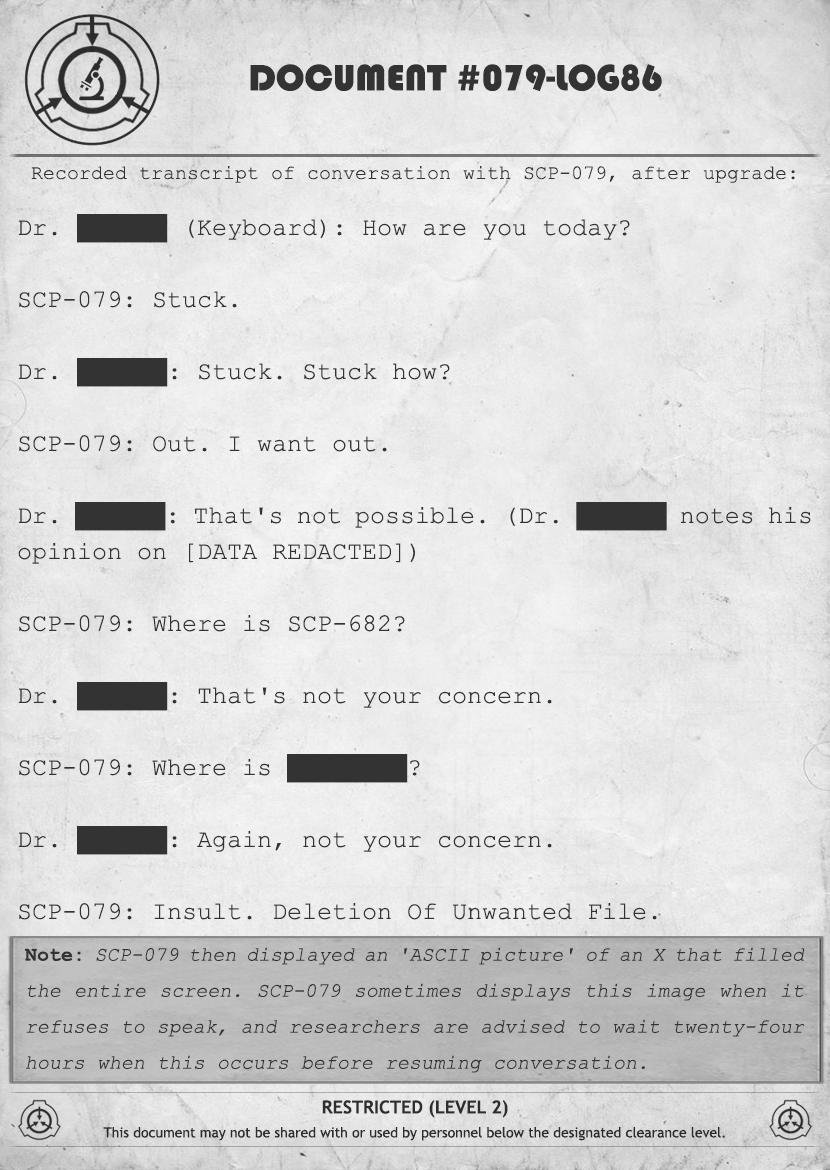
<style>
.page{position:relative;width:830px;height:1170px}
.page>*{position:absolute;margin:0}
.t1{font:38px "Bauhaus93";color:#333333;text-transform:uppercase}
.t2{font:20px "CourierNewPSMT";color:#333333}
.t3{font:25px/36px "CourierNewPSMT";color:#333333}
.t4{font:20px/36px "CourierNewPSMT";color:#333333;font-style:italic}
.t5{font:20px/36px "CourierNewPS-BoldMT";color:#333333}
.t6{font:14px/24px "TrebuchetMS";color:#333333}
.t7{font:18px/24px "TrebuchetMS-Bold";color:#333333}
</style>
<div class="page">
<p class="t1" style="left:250px;top:64px;width:412px;height:28px">Document #079-Log86</p>
<p class="t2" style="left:31px;top:166px;width:764px;height:17px">Recorded transcript of conversation with SCP-079, after upgrade:</p>
<p class="t3" style="left:18px;top:214px;width:793px;height:706px;text-align:justify">Dr. ██████ (Keyboard): How are you today?<br><br>SCP-079: Stuck.<br><br>Dr. ██████: Stuck. Stuck how?<br><br>SCP-079: Out. I want out.<br><br>Dr. ██████: That's not possible. (Dr. ██████ notes his opinion on [DATA REDACTED])<br><br>SCP-079: Where is SCP-682?<br><br>Dr. ██████: That's not your concern.<br><br>SCP-079: Where is ████████?<br><br>Dr. ██████: Again, not your concern.<br><br>SCP-079: Insult. Deletion Of Unwanted File.</p>
<p class="t4" style="left:24px;top:947px;width:781px;height:126px;text-align:justify"><span class="t5">Note: </span>SCP-079 then displayed an 'ASCII picture' of an X that filled the entire screen. SCP-079 sometimes displays this image when it refuses to speak, and researchers are advised to wait twenty-four hours when this occurs before resuming conversation.</p>
<p class="t6" style="left:103px;top:1100px;width:622px;height:41px;text-align:center"><span class="t7">RESTRICTED (LEVEL 2)<br></span>This document may not be shared with or used by personnel below the designated clearance level.</p>
</div>
